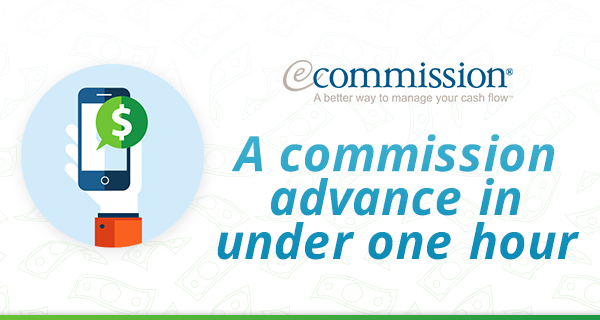
<style>
.page{position:relative;width:600px;height:320px;background:#ffffff}
.page>*{position:absolute;margin:0}
.t1{font:48.7px/43.9px "OpenSans-BoldItalic"}
</style>
<div class="page">
<p class="t1" style="left:217px;top:134px;width:362px;height:126px;text-align:center">A commission<br>advance in<br>under one hour</p>
</div>
